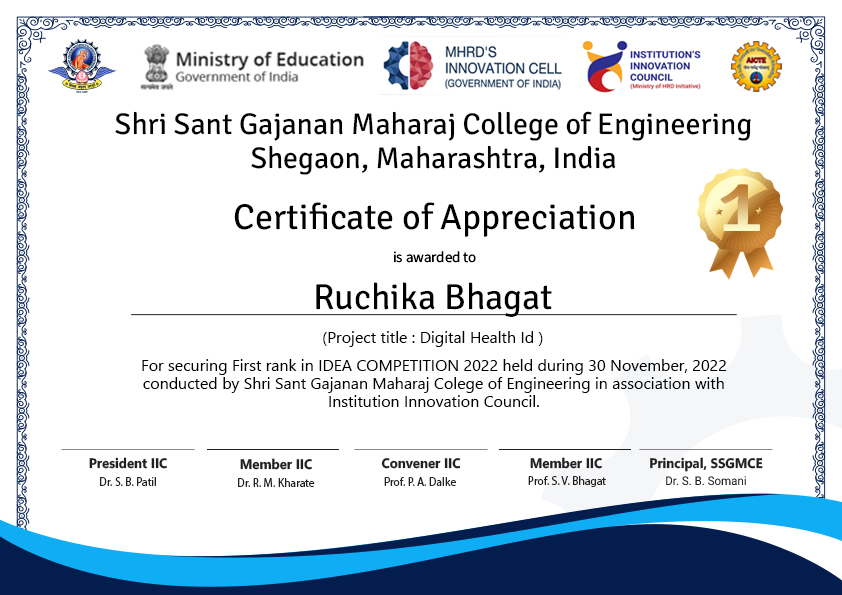
<style>
.page{position:relative;width:842px;height:595px;background:#ffffff}
.page>*{position:absolute;margin:0}
.t1{font:30px/34px "SignikaNegative-Regular";color:#000000}
.t2{font:36px "SignikaNegative-Regular";color:#000000}
.t3{font:15px "SourceSansRoman-Regular";color:#000000}
.t4{font:16px "SegoeUISymbol";color:#000000}
.t5{font:16px/18px "SegoeUISymbol";color:#000000}
.t6{font:13.7px "SegoeUIVariable-BoldText";color:#231f20;scale:0.96 1}
.t7{font:12px "MyriadPro-Regular";color:#231f20;scale:0.96 1}
.t8{font:12px "Roboto-Regular";color:#231f20;scale:0.96 1}
</style>
<div class="page">
<p class="t1" style="left:115px;top:111px;width:636px;height:64px;text-align:center">Shri Sant Gajanan Maharaj College of Engineering <br>Shegaon, Maharashtra, India</p>
<p class="t2" style="left:234px;top:202px;width:401px;height:35px">Certificate of Appreciation</p>
<p class="t3" style="left:394px;top:251px;width:82px;height:12px">is awarded to</p>
<p class="t2" style="left:316px;top:282px;width:236px;height:35px">Ruchika Bhagat</p>
<p class="t4" style="left:323px;top:331px;width:220px;height:16px">(Project title : Digital Health Id )</p>
<p class="t5" style="left:142px;top:359px;width:585px;height:48px;text-align:center">For securing First rank in IDEA COMPETITION 2022 held during 30 November, 2022 conducted by Shri Sant Gajanan Maharaj Colege of Engineering in association with Institution Innovation Council.<br> (Session 2022-23)</p>
<p class="t6" style="left:89px;top:457px;width:78px;height:12px">President IIC</p>
<p class="t6" style="left:240px;top:458px;width:72px;height:12px">Member IIC</p>
<p class="t6" style="left:381px;top:458px;width:80px;height:11px">Convener IIC</p>
<p class="t6" style="left:530px;top:457px;width:72px;height:12px">Member IIC</p>
<p class="t6" style="left:650px;top:457px;width:113px;height:15px">Principal, SSGMCE</p>
<p class="t7" style="left:100px;top:477px;width:56px;height:9px">Dr. S. B. Patil</p>
<p class="t7" style="left:238px;top:478px;width:77px;height:9px">Dr. R. M. Kharate</p>
<p class="t7" style="left:384px;top:477px;width:72px;height:9px">Prof. P. A. Dalke</p>
<p class="t7" style="left:528px;top:476px;width:78px;height:11px">Prof. S. V. Bhagat</p>
<p class="t8" style="left:666px;top:476px;width:80px;height:9px">Dr. S. B. Somani</p>
</div>
